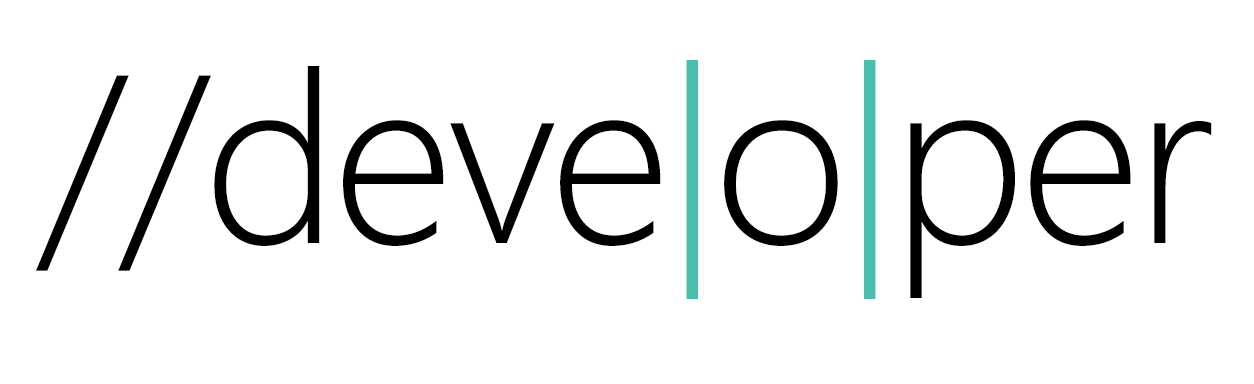
<style>
.page{position:relative;width:1254px;height:384px;background:#ffffff}
.page>*{position:absolute;margin:0}
.t1{font:221.3px "MicrosoftJhengHeiUILight";letter-spacing:-0.025em;color:#000000}
.t2{font:221.3px "MicrosoftJhengHeiUILight";letter-spacing:-0.025em;color:#4abdac}
</style>
<div class="page">
<p class="t1" style="left:36px;top:60px;width:1176px;height:239px">//deve<span class="t2">|</span>o<span class="t2">|</span>per</p>
</div>
